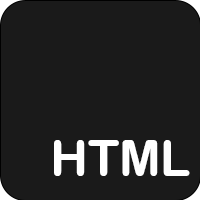
<style>
.page{position:relative;width:200px;height:200px;background:#1a1a1a}
.page>*{position:absolute;margin:0}
.t1{font:50px "ArialRoundedMTBold";color:#ffffff}
</style>
<div class="page">
<p class="t1" style="left:54px;top:140px;width:136px;height:36px">HTML</p>
</div>
